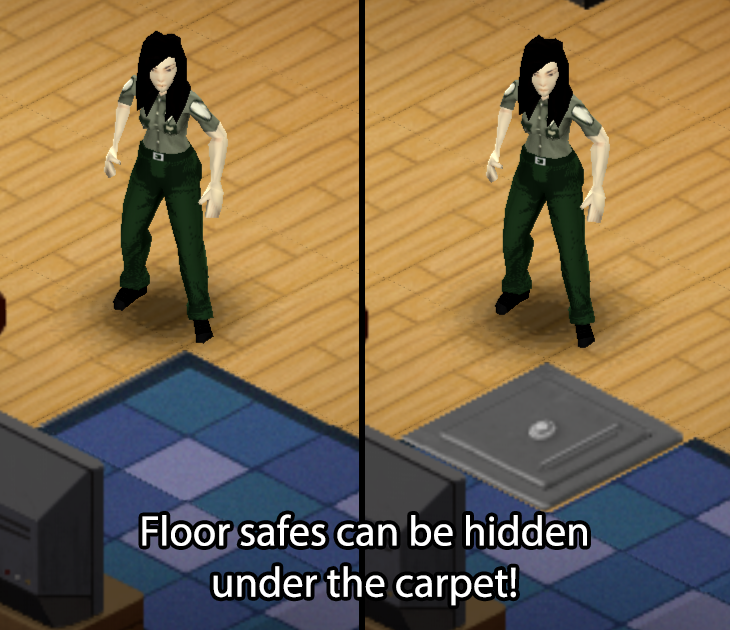
<style>
.page{position:relative;width:730px;height:630px}
.page>*{position:absolute;margin:0}
.t1{font:42.7px "MyriadPro-Regular";color:#ffffff}
</style>
<div class="page">
<p class="t1" style="left:142px;top:514px;width:445px;height:92px;text-align:center">Floor safes can be hidden<br>under the carpet!</p>
</div>
